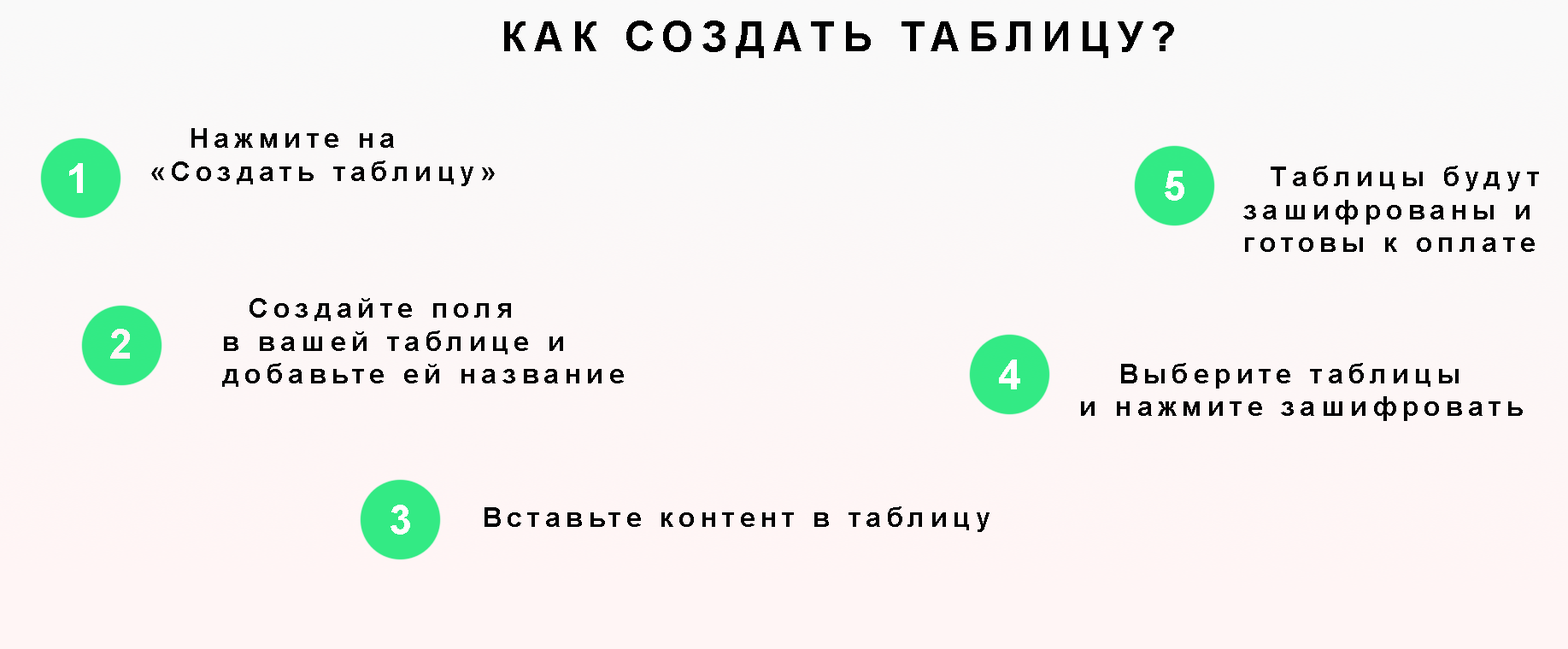
<style>
.page{position:relative;width:1568px;height:649px}
.page>*{position:absolute;margin:0}
.t1{font:41px "Arial-BoldMT";letter-spacing:0.2em;color:#000000}
.t2{font:27.3px "Arial-BoldMT";letter-spacing:0.2em;color:#000000}
.t3{font:41px "Arial-BoldMT";letter-spacing:0.2em;color:#ffffff}
</style>
<div class="page">
<p class="t1" style="left:504px;top:21px;width:670px;height:37px">КАК СОЗДАТЬ ТАБЛИЦУ?</p>
<p class="t2" style="left:151px;top:128px;width:344px;height:58px">Нажмите на <br>«Создать таблицу»</p>
<p class="t3" style="left:1165px;top:171px;width:19px;height:30px">5</p>
<p class="t2" style="left:1243px;top:166px;width:296px;height:86px">Таблицы будут <br>зашифрованы и <br>готовы к оплате</p>
<p class="t2" style="left:222px;top:298px;width:402px;height:89px">Создайте поля <br>в вашей таблице и <br>добавьте ей название</p>
<p class="t3" style="left:999px;top:360px;width:21px;height:30px">4</p>
<p class="t2" style="left:1081px;top:363px;width:442px;height:58px">Выберите таблицы <br>и нажмите зашифровать</p>
<p class="t2" style="left:484px;top:507px;width:506px;height:25px">Вставьте контент в таблицу</p>
</div>
